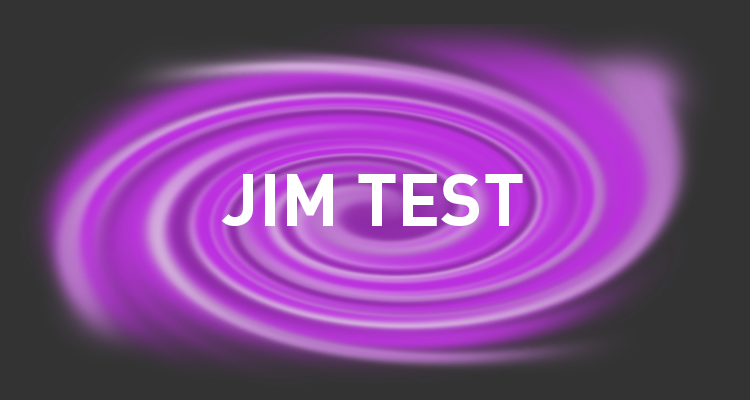
<style>
.page{position:relative;width:750px;height:400px;background:#333333}
.page>*{position:absolute;margin:0}
.t1{font:72px "DINPro-Bold";color:#ffffff}
</style>
<div class="page">
<p class="t1" style="left:221px;top:174px;width:302px;height:52px">JIM TEST</p>
</div>
